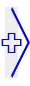
<style>
.page{position:relative;width:30px;height:86px;background:#ffffff}
.page>*{position:absolute;margin:0}
.t1{font:102.9px "YouYuan";color:#0000ff;scale:0.49 1}
.t2{font:36px "STCaiyun";color:#0000ff}
</style>
<div class="page">
<p class="t1" style="left:11px;top:7px;width:19px;height:71px;rotate:180deg">&lt;</p>
<p class="t2" style="left:1px;top:33px;width:21px;height:20px;rotate:180deg">+</p>
</div>
